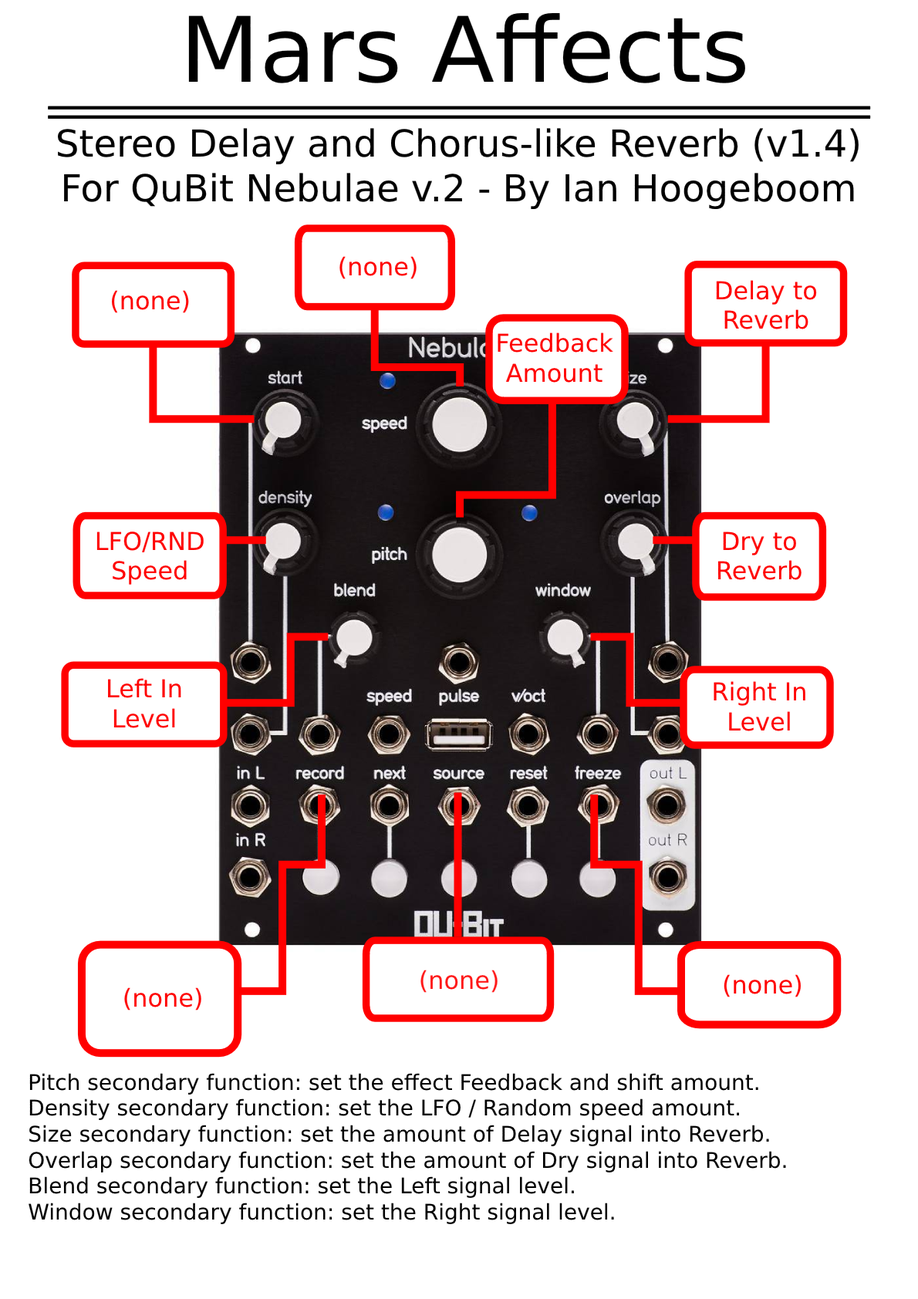
<style>
.page{position:relative;width:918px;height:1299px;background:#ffffff}
.page>*{position:absolute;margin:0}
.t1{font:90.3px "Helvetica";color:#000000}
.t2{font:37.2px "Helvetica";color:#000000}
.t3{font:37.2px "Helvetica";letter-spacing:-0.003em;color:#000000}
.t4{font:24.7px "Helvetica";color:#ff0000}
.t5{font:24.7px "Helvetica";color:#ff1919}
.t6{font:21.6px "Helvetica";color:#000000}
</style>
<div class="page">
<p class="t1" style="left:188px;top:13px;width:557px;height:70px">Mars Affects</p>
<p class="t2" style="left:57px;top:128px;width:802px;height:82px;text-align:center">Stereo Delay and Chorus-like Reverb (v1.4)<br>For Q<span class="t3">u</span>Bit N<span class="t3">e</span>bulae v.2 - By Ian Hoogeboom</p>
<p class="t4" style="left:339px;top:256px;width:78px;height:23px">(none)</p>
<p class="t4" style="left:716px;top:280px;width:101px;height:49px;text-align:center">Delay to<br>Reverb</p>
<p class="t4" style="left:111px;top:290px;width:78px;height:23px">(none)</p>
<p class="t4" style="left:498px;top:332px;width:115px;height:51px;text-align:center">Feedback<br>Amount</p>
<p class="t4" style="left:96px;top:531px;width:108px;height:54px;text-align:center">LFO/RND<br>Speed</p>
<p class="t4" style="left:718px;top:531px;width:83px;height:49px;text-align:center">Dry to<br>Reverb</p>
<p class="t4" style="left:108px;top:678px;width:73px;height:50px;text-align:center">Left In<br>Level</p>
<p class="t4" style="left:714px;top:681px;width:91px;height:50px;text-align:center">Right In<br>Level</p>
<p class="t5" style="left:420px;top:970px;width:78px;height:23px">(none)</p>
<p class="t4" style="left:724px;top:974px;width:77px;height:23px">(none)</p>
<p class="t4" style="left:124px;top:987px;width:77px;height:24px">(none)</p>
<p class="t6" style="left:29px;top:1073px;width:757px;height:151px">Pitch secondary function: set the effect Feedback and shift amount.<br>Density secondary function: set the LFO / Random speed amount.<br>Size secondary function: set the amount of Delay signal into Reverb.<br>Overlap secondary function: set the amount of Dry signal into Reverb.<br>Blend secondary function: set the Left signal level.<br>Window secondary function: set the Right signal level.</p>
</div>
